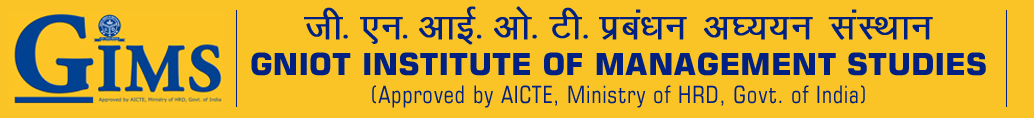
<style>
.page{position:relative;width:1034px;height:118px;background:#fac426}
.page>*{position:absolute;margin:0}
.t1{font:42.6px "KrutiDev010";color:#002181;font-weight:bold}
.t2{font:24.8px "ArialRoundedMTBold";color:#002181;font-weight:bold}
.t3{font:30.3px "Square721BT-Bold";color:#002181;text-transform:uppercase}
.t4{font:23.9px "Square721BT-RomanCondensed";letter-spacing:0.04em;color:#002181}
</style>
<div class="page">
<p class="t1" style="left:304px;top:6px;width:629px;height:39px">th ,u vkbZ vks Vh izca/ku v?;;u laLFkku</p>
<p class="t2" style="left:343px;top:34px;width:5px;height:5px">.</p>
<p class="t2" style="left:403px;top:34px;width:5px;height:5px">.</p>
<p class="t2" style="left:477px;top:34px;width:5px;height:5px">.</p>
<p class="t2" style="left:532px;top:34px;width:5px;height:5px">.</p>
<p class="t2" style="left:583px;top:34px;width:5px;height:5px">.</p>
<p class="t3" style="left:251px;top:52px;width:735px;height:24px">GNIOT Institute of Management Studies</p>
<p class="t4" style="left:372px;top:85px;width:493px;height:23px">(Approved by AICTE, Ministry of HRD, Govt. of India)</p>
</div>
